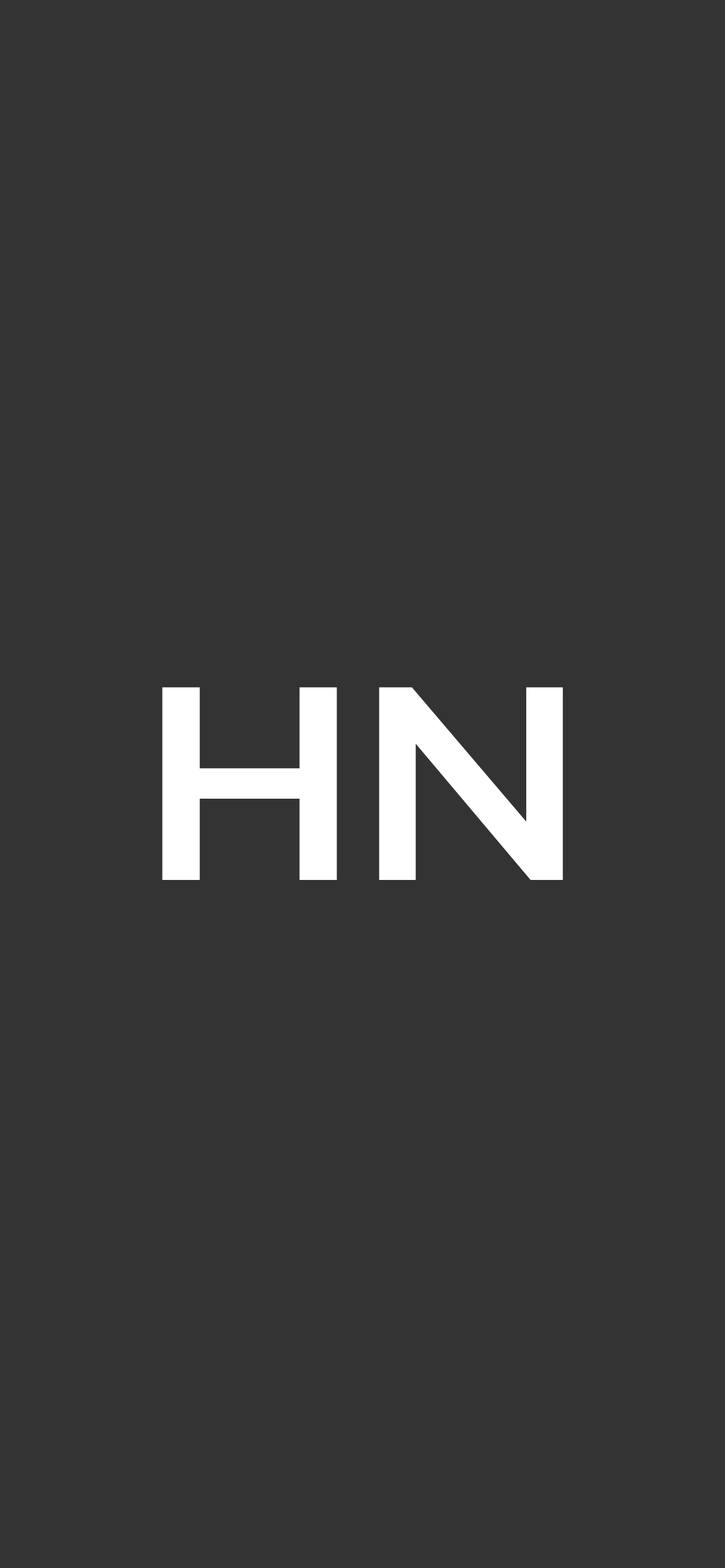
<style>
.page{position:relative;width:725px;height:1568px;background:#333333}
.page>*{position:absolute;margin:0}
.t1{font:282.2px "GillSans-SemiBold";color:#ffffff}
</style>
<div class="page">
<p class="t1" style="left:162px;top:687px;width:401px;height:193px">HN</p>
</div>
